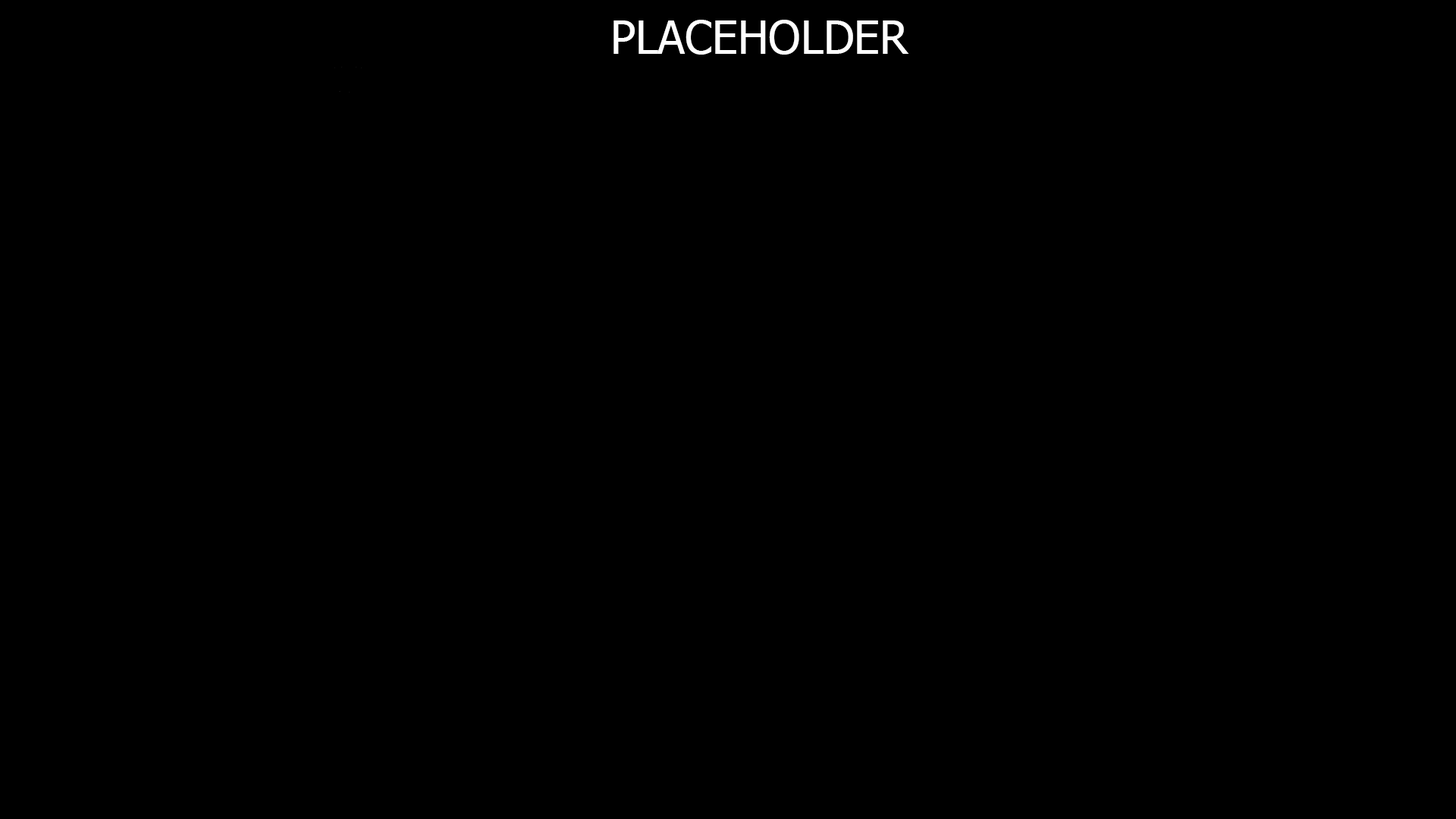
<style>
.page{position:relative;width:1456px;height:819px;background:#000000}
.page>*{position:absolute;margin:0}
.t1{font:45.5px "Tahoma";color:#ffffff}
</style>
<div class="page">
<p class="t1" style="left:613px;top:20px;width:296px;height:35px">PLACEHOLDER</p>
</div>
